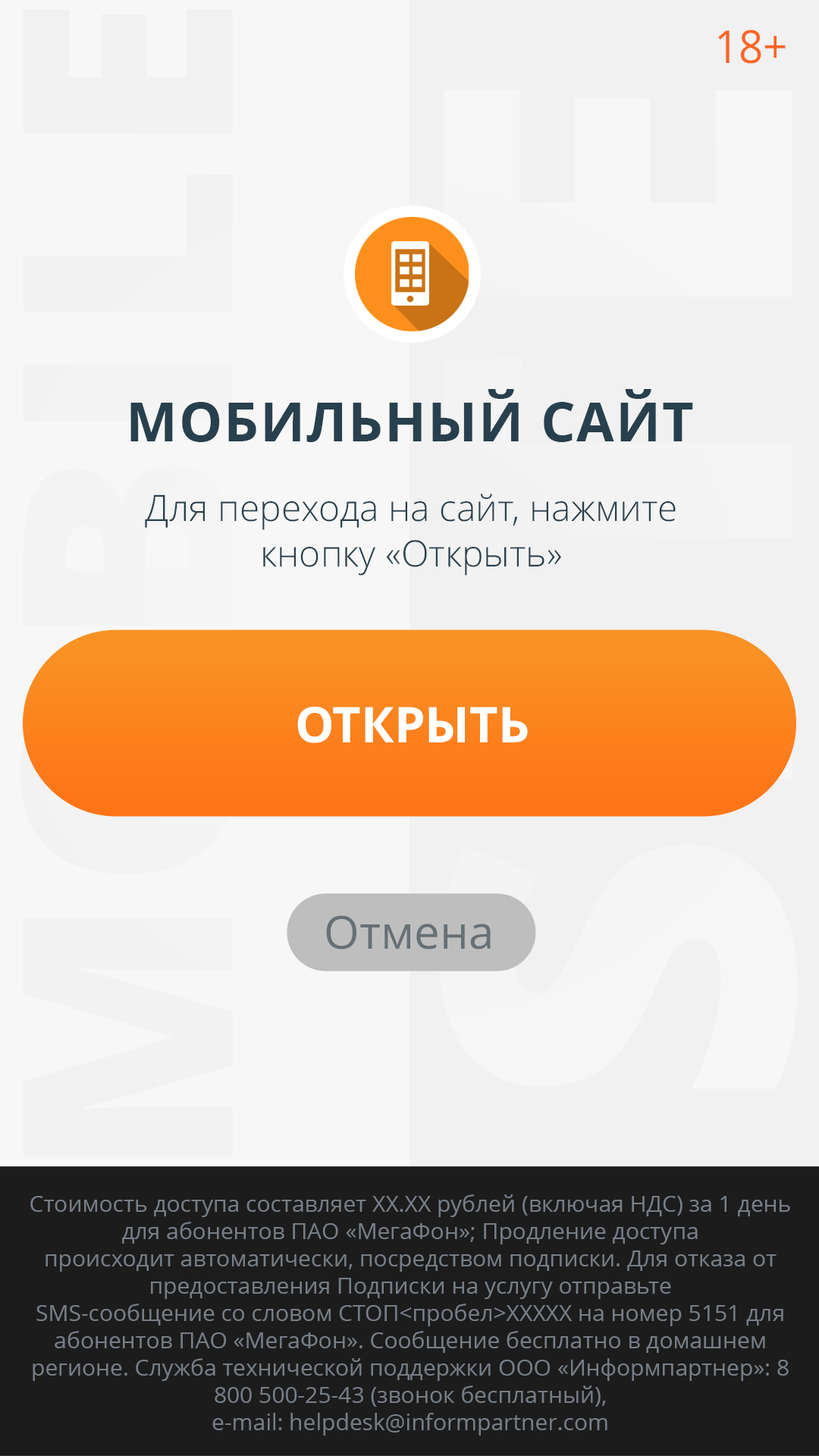
<style>
.page{position:relative;width:819px;height:1456px;background:#f7f7f7}
.page>*{position:absolute;margin:0}
.t1{font:45.5px "OpenSans";color:#f96625;text-transform:uppercase;scale:0.94 1}
.t2{font:54.6px "OpenSans-Bold";letter-spacing:0.025em;color:#28404d;text-transform:uppercase}
.t3{font:36.4px/45.5px "OpenSans-Light";color:#28404d}
.t4{font:49.3px "OpenSans-Bold";color:#ffffff;text-transform:uppercase}
.t5{font:45.5px "OpenSans";color:#667076}
.t6{font:22.7px/27.3px "OpenSans";color:#777e87}
</style>
<div class="page">
<p class="t1" style="left:718px;top:30px;width:68px;height:34px">18+</p>
<p class="t2" style="left:130px;top:389px;width:563px;height:53px">Мобильный сайт</p>
<p class="t3" style="left:145px;top:494px;width:531px;height:82px;text-align:center">Для перехода на сайт, нажмите кнопку «Открыть»</p>
<p class="t4" style="left:297px;top:706px;width:231px;height:37px">Открыть</p>
<p class="t5" style="left:326px;top:915px;width:165px;height:34px">Отмена</p>
<p class="t6" style="left:30px;top:1194px;width:760px;height:242px;text-align:center">Стоимость доступа составляет XX.XX рублей (включая НДС) за 1 день для абонентов ПАО «МегаФон»; Продление доступа       <br>происходит автоматически, посредством подписки. Для отказа от предоставления Подписки на услугу отправьте <br>SMS-сообщение со словом СТОП&lt;пробел&gt;XXXXX на номер 5151 для абонентов ПАО «МегаФон». Cообщение бесплатно в домашнем <br>регионе. Служба технической поддержки ООО «Информпартнер»: 8 800 500-25-43 (звонок бесплатный), <br>e-mail: helpdesk@informpartner.com</p>
</div>
